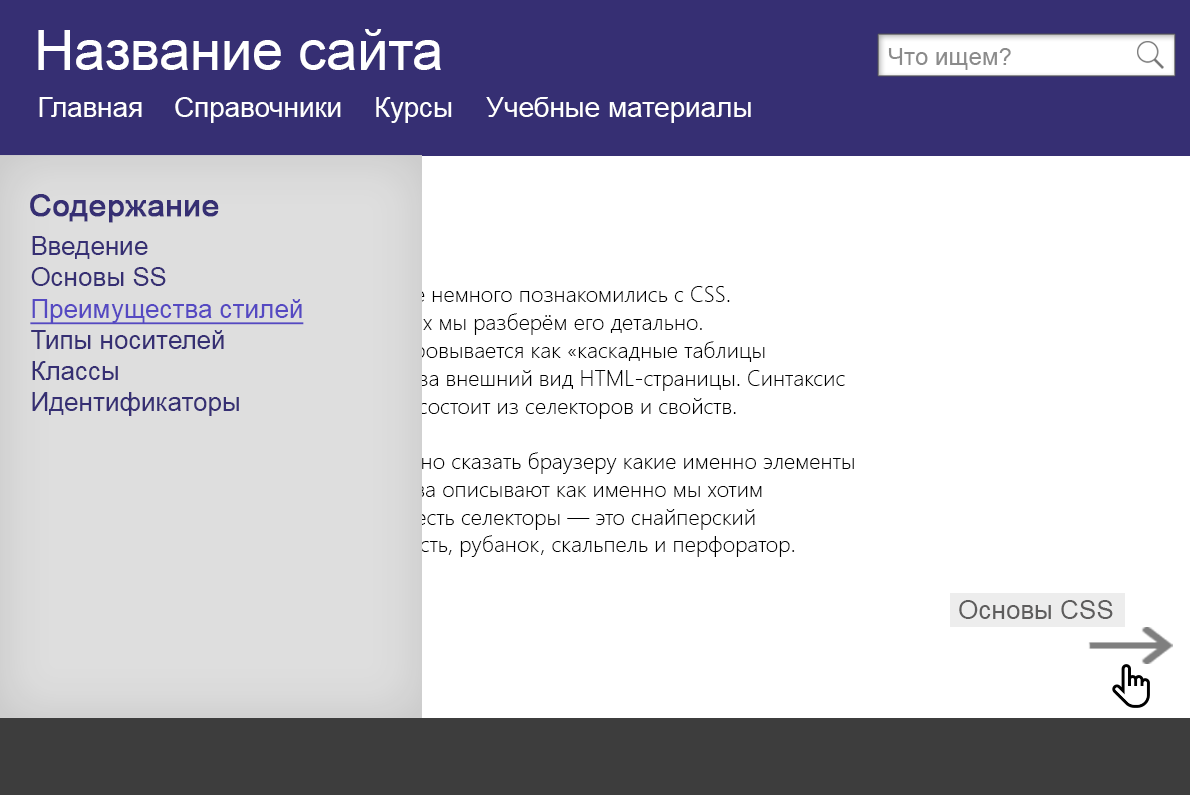
<style>
.page{position:relative;width:1190px;height:795px;background:#ffffff}
.page>*{position:absolute;margin:0}
.t1{font:55.6px "ArialMT";color:#ffffff}
.t2{font:24.3px "ArialMT";color:#8b8b8b}
.t3{font:27.8px "ArialMT";color:#ffffff}
.t4{font:31.2px "ArialMT";color:#362f73;font-weight:bold}
.t5{font:26px "ArialMT";color:#362f73}
.t6{font:26px "ArialMT";color:#5549c2;text-decoration:underline}
.t7{font:34.7px "ArialMT";color:#ffffff}
.t8{font:22.2px/27.8px "SegoeUI-Light"}
.t9{font:26px "ArialMT";color:#656464}
</style>
<div class="page">
<p class="t1" style="left:38px;top:29px;width:403px;height:41px">Название сайта</p>
<p class="t2" style="left:888px;top:48px;width:123px;height:22px">Что ищем?</p>
<p class="t3" style="left:39px;top:97px;width:103px;height:20px">Главная</p>
<p class="t3" style="left:175px;top:97px;width:166px;height:26px">Справочники</p>
<p class="t3" style="left:376px;top:97px;width:76px;height:26px">Курсы</p>
<p class="t3" style="left:486px;top:97px;width:265px;height:26px">Учебные материалы</p>
<p class="t4" style="left:30px;top:194px;width:189px;height:29px">Содержание</p>
<p class="t5" style="left:30px;top:236px;width:274px;height:180px">Введение<br>Основы SS<br><span class="t6">Преимущества стилей<br></span>Типы носителей<br>Классы<br>Идентификаторы<br><span class="t7"></span></p>
<p class="t8" style="left:144px;top:286px;width:710px;height:271px">В предыдущих курсах вы уже немного познакомились с CSS.<br>В этом и последующих курсах мы разберём его детально.<br>Напомним, что CSS расшифровывается как «каскадные таблицы<br>стилей». Этот язык отвечает за внешний вид HTML-страницы. Синтаксис<br>языка достаточно прост: он состоит из селекторов и свойств.<br><br>С помощью селекторов можно сказать браузеру какие именно элементы <br>мы хотим оформить. Свойства описывают как именно мы хотим<br>оформить эти элементы. То есть селекторы — это снайперский<br>прицел, а свойства — это кисть, рубанок, скальпель и перфоратор.</p>
<p class="t9" style="left:959px;top:600px;width:154px;height:19px">Основы CSS</p>
</div>
